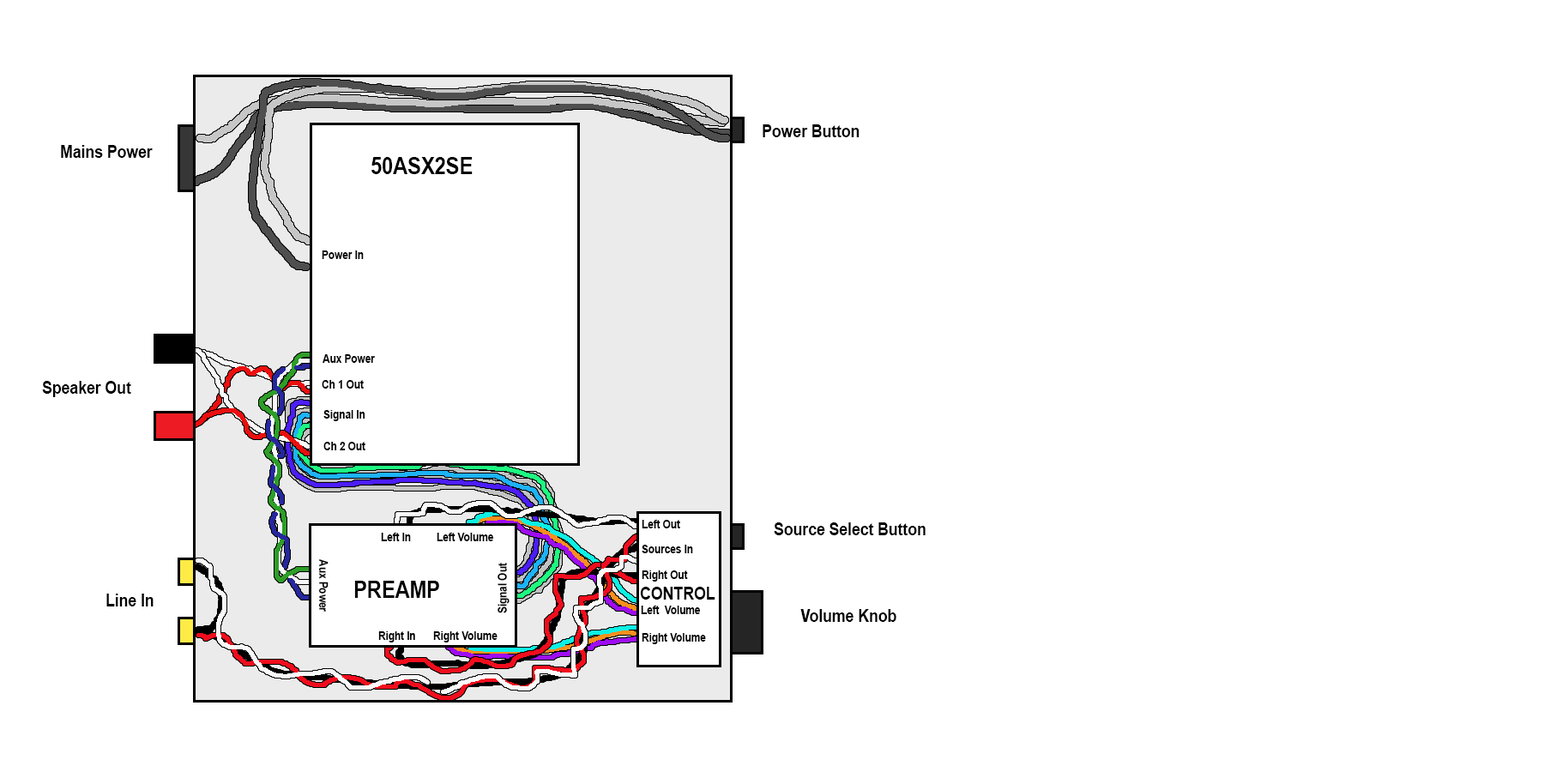
<style>
.page{position:relative;width:1544px;height:772px;background:#ffffff}
.page>*{position:absolute;margin:0}
.t1{font:17.8px "Arial-BoldMT";letter-spacing:-0.012em;color:#000000;scale:0.87 1}
.t2{font:23.7px "Arial-BoldMT";letter-spacing:-0.012em;color:#000000;scale:0.87 1}
.t3{font:11.8px "Arial-BoldMT";letter-spacing:-0.012em;color:#000000;scale:0.87 1}
</style>
<div class="page">
<p class="t1" style="left:763px;top:124px;width:97px;height:13px">Power Button</p>
<p class="t1" style="left:61px;top:145px;width:92px;height:13px">Mains Power</p>
<p class="t2" style="left:371px;top:157px;width:102px;height:17px">50ASX2SE</p>
<p class="t3" style="left:322px;top:251px;width:42px;height:8px">Power In</p>
<p class="t3" style="left:323px;top:354px;width:52px;height:9px">Aux Power</p>
<p class="t1" style="left:42px;top:381px;width:89px;height:16px">Speaker Out</p>
<p class="t3" style="left:322px;top:380px;width:42px;height:9px">Ch 1 Out</p>
<p class="t3" style="left:323px;top:410px;width:42px;height:11px">Signal In</p>
<p class="t3" style="left:323px;top:442px;width:42px;height:8px">Ch 2 Out</p>
<p class="t3" style="left:642px;top:520px;width:38px;height:8px">Left Out</p>
<p class="t3" style="left:381px;top:533px;width:30px;height:8px">Left In</p>
<p class="t3" style="left:437px;top:533px;width:57px;height:8px">Left Volume</p>
<p class="t1" style="left:774px;top:522px;width:152px;height:13px">Source Select Button</p>
<p class="t3" style="left:642px;top:545px;width:51px;height:8px">Sources In</p>
<p class="t3" style="left:318px;top:559px;width:11px;height:53px;rotate:90deg">Aux Power</p>
<p class="t3" style="left:498px;top:563px;width:12px;height:50px;rotate:-90deg">Signal Out</p>
<p class="t2" style="left:354px;top:581px;width:85px;height:17px">PREAMP</p>
<p class="t3" style="left:642px;top:571px;width:46px;height:11px">Right Out</p>
<p class="t1" style="left:106px;top:594px;width:48px;height:13px">Line In</p>
<p class="t1" style="left:640px;top:587px;width:76px;height:13px">CONTROL</p>
<p class="t3" style="left:641px;top:606px;width:60px;height:8px">Left  Volume</p>
<p class="t1" style="left:800px;top:609px;width:97px;height:13px">Volume Knob</p>
<p class="t3" style="left:378px;top:631px;width:37px;height:12px">Right In</p>
<p class="t3" style="left:433px;top:631px;width:65px;height:12px">Right Volume</p>
<p class="t3" style="left:642px;top:633px;width:64px;height:11px">Right Volume</p>
</div>
